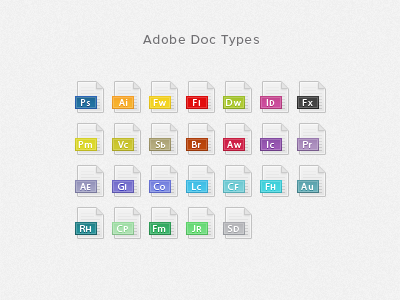
<style>
.page{position:relative;width:400px;height:300px}
.page>*{position:absolute;margin:0}
.t1{font:13px "ProximaNova-Regular";letter-spacing:0.08em;color:#717073}
.t2{font:10px "MyriadPro-Regular";letter-spacing:0.08em;color:#ffffff}
.t3{font:8px "MyriadPro-Regular";letter-spacing:0.08em;color:#ffffff}
</style>
<div class="page">
<p class="t1" style="left:143px;top:34px;width:116px;height:12px">Adobe Doc Types</p>
<p class="t2" style="left:81px;top:99px;width:9px;height:7px">Ps</p>
<p class="t2" style="left:119px;top:99px;width:9px;height:7px">Ai</p>
<p class="t2" style="left:153px;top:99px;width:13px;height:7px">Fw</p>
<p class="t2" style="left:193px;top:99px;width:7px;height:7px">F<span class="t3">l</span></p>
<p class="t2" style="left:226px;top:99px;width:15px;height:7px">Dw</p>
<p class="t2" style="left:266px;top:99px;width:9px;height:7px">I<span class="t3">D</span></p>
<p class="t2" style="left:302px;top:99px;width:11px;height:7px">Fx</p>
<p class="t2" style="left:78px;top:141px;width:14px;height:7px">Pm</p>
<p class="t2" style="left:118px;top:141px;width:10px;height:7px">Vc</p>
<p class="t2" style="left:155px;top:141px;width:11px;height:7px">S<span class="t3">b</span></p>
<p class="t2" style="left:192px;top:141px;width:9px;height:7px">Br</p>
<p class="t2" style="left:227px;top:141px;width:15px;height:7px">Aw</p>
<p class="t2" style="left:267px;top:141px;width:7px;height:7px">Ic</p>
<p class="t2" style="left:303px;top:141px;width:9px;height:7px">Pr</p>
<p class="t2" style="left:80px;top:183px;width:11px;height:7px">A<span class="t3">E</span></p>
<p class="t2" style="left:118px;top:183px;width:9px;height:7px">G<span class="t3">l</span></p>
<p class="t2" style="left:153px;top:183px;width:12px;height:7px">Co</p>
<p class="t2" style="left:192px;top:183px;width:9px;height:7px">Lc</p>
<p class="t2" style="left:228px;top:183px;width:11px;height:7px">C<span class="t3">F</span></p>
<p class="t2" style="left:265px;top:183px;width:11px;height:7px">F<span class="t3">H</span></p>
<p class="t2" style="left:301px;top:183px;width:12px;height:7px">Au</p>
<p class="t2" style="left:80px;top:225px;width:11px;height:7px">R<span class="t3">H</span></p>
<p class="t2" style="left:117px;top:225px;width:11px;height:7px">C<span class="t3">P</span></p>
<p class="t2" style="left:153px;top:225px;width:13px;height:7px">Fm</p>
<p class="t2" style="left:192px;top:225px;width:10px;height:7px">J<span class="t3">R</span></p>
<p class="t2" style="left:227px;top:225px;width:12px;height:7px">S<span class="t3">D</span></p>
</div>
